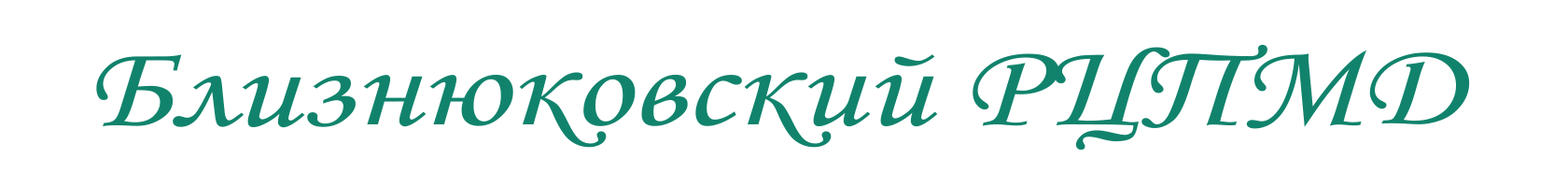
<style>
.page{position:relative;width:1568px;height:187px;background:#ffffff}
.page>*{position:absolute;margin:0}
.t1{font:120.2px "MonotypeCorsiva";color:#11836c;scale:1.21 1}
</style>
<div class="page">
<p class="t1" style="left:96px;top:44px;width:1374px;height:106px">Близнюковский РЦПМД</p>
</div>
